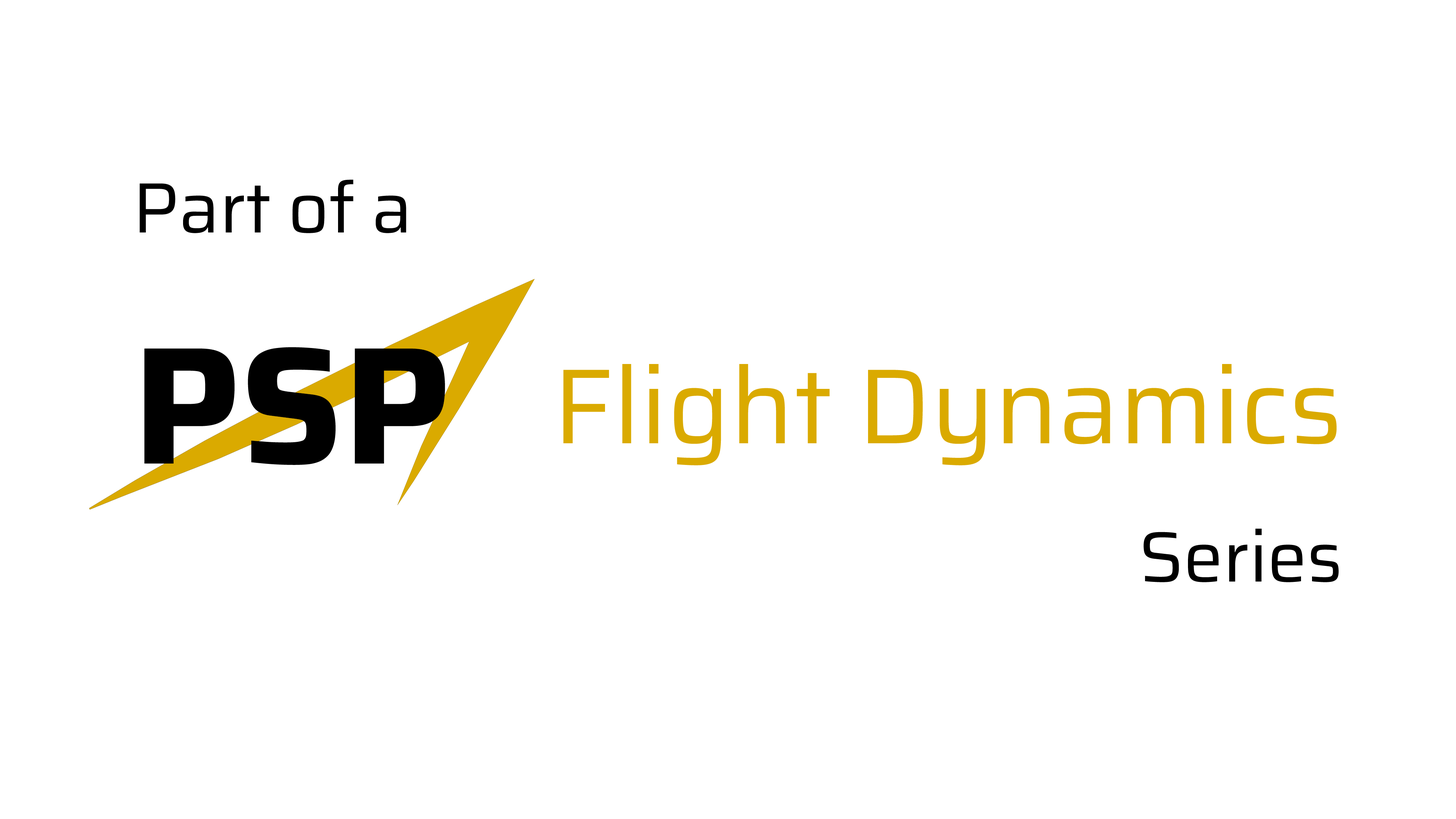
<style>
.page{position:relative;width:1456px;height:819px;background:#ffffff}
.page>*{position:absolute;margin:0}
.t1{font:71.1px "Saira-Regular";color:#000000}
.t2{font:167.1px "Saira-Bold";color:#000000}
.t3{font:106.6px "Saira-Regular";color:#daaa00}
</style>
<div class="page">
<p class="t1" style="left:140px;top:180px;width:266px;height:53px">Part of a</p>
<p class="t2" style="left:144px;top:347px;width:301px;height:118px">PSP</p>
<p class="t3" style="left:563px;top:364px;width:774px;height:101px">Flight Dynamics</p>
<p class="t1" style="left:1144px;top:529px;width:195px;height:53px">Series</p>
</div>
